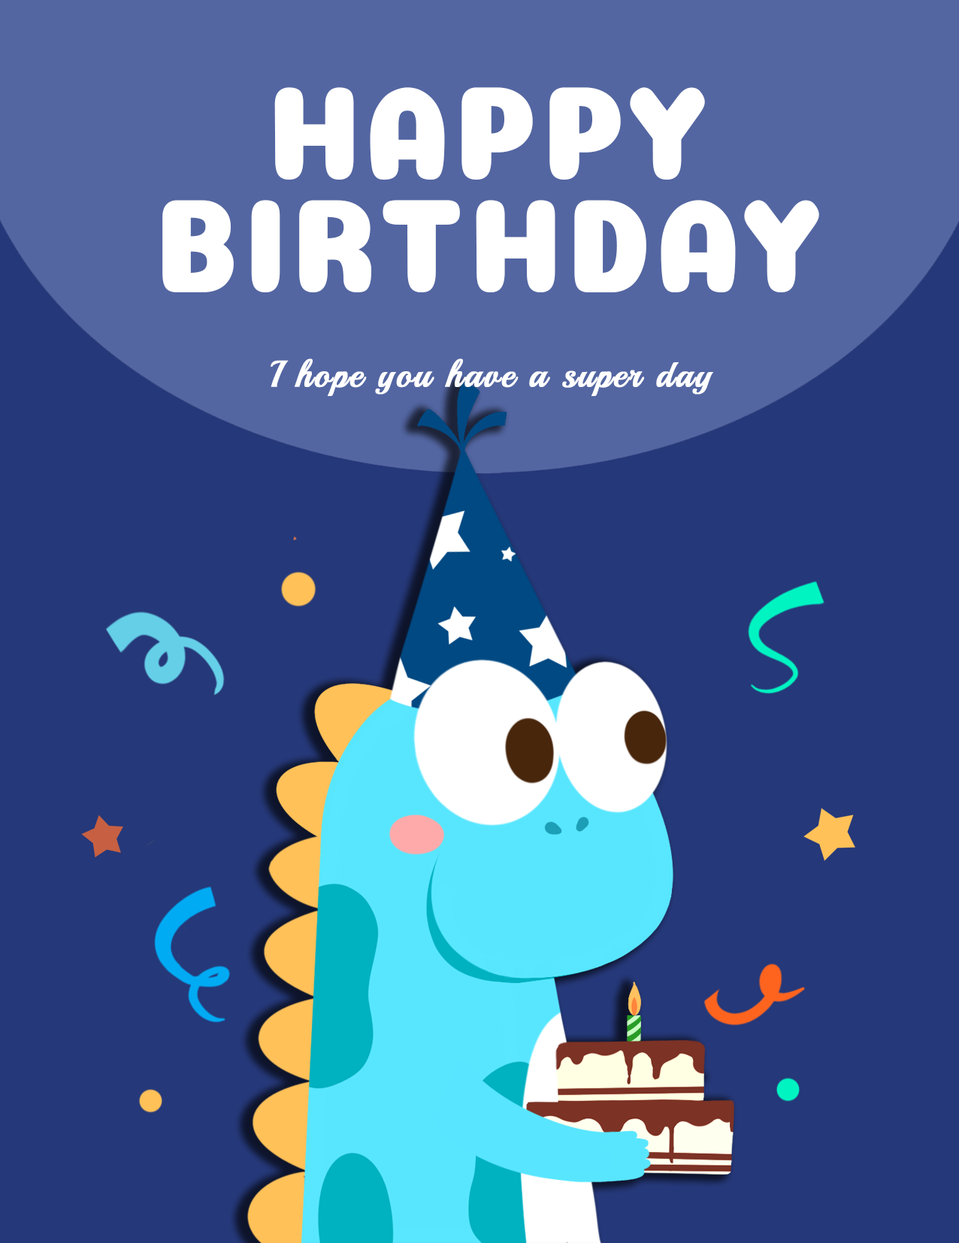
<style>
.page{position:relative;width:959px;height:1243px;background:#253879}
.page>*{position:absolute;margin:0}
.t1{font:132.6px/112.7px "Coiny-Regular";letter-spacing:0.03em;color:#ffffff;font-weight:bold;scale:0.87 1}
.t2{font:36.8px "Playball-Regular";letter-spacing:0.03em;color:#ffffff;font-weight:bold}
</style>
<div class="page">
<p class="t1" style="left:162px;top:87px;width:657px;height:205px;text-align:center">HAPPY<br>BIRTHDAY</p>
<p class="t2" style="left:271px;top:359px;width:442px;height:37px">I hope you have a super day</p>
</div>
